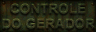
<style>
.page{position:relative;width:96px;height:32px}
.page>*{position:absolute;margin:0}
.t1{font:13px/15px "Arial-BoldMT";color:#34371f;font-weight:bold}
</style>
<div class="page">
<p class="t1" style="left:2px;top:3px;width:93px;height:26px;text-align:center">CONTROLE<br>DO GERADOR</p>
</div>
